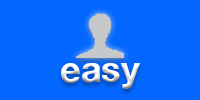
<style>
.page{position:relative;width:200px;height:100px;background:#0267ff}
.page>*{position:absolute;margin:0}
.t1{font:36px "HelveticaNeue-Bold";color:#ffffff}
</style>
<div class="page">
<p class="t1" style="left:61px;top:63px;width:79px;height:26px">easy</p>
</div>
